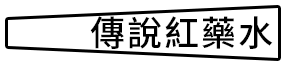
<style>
.page{position:relative;width:286px;height:66px;background:#ffffff}
.page>*{position:absolute;margin:0}
.t1{font:35px "NotoSansCJKtc-Medium";letter-spacing:0.06em;color:#000000}
</style>
<div class="page">
<p class="t1" style="left:90px;top:16px;width:183px;height:33px">傳說紅藥水</p>
</div>
